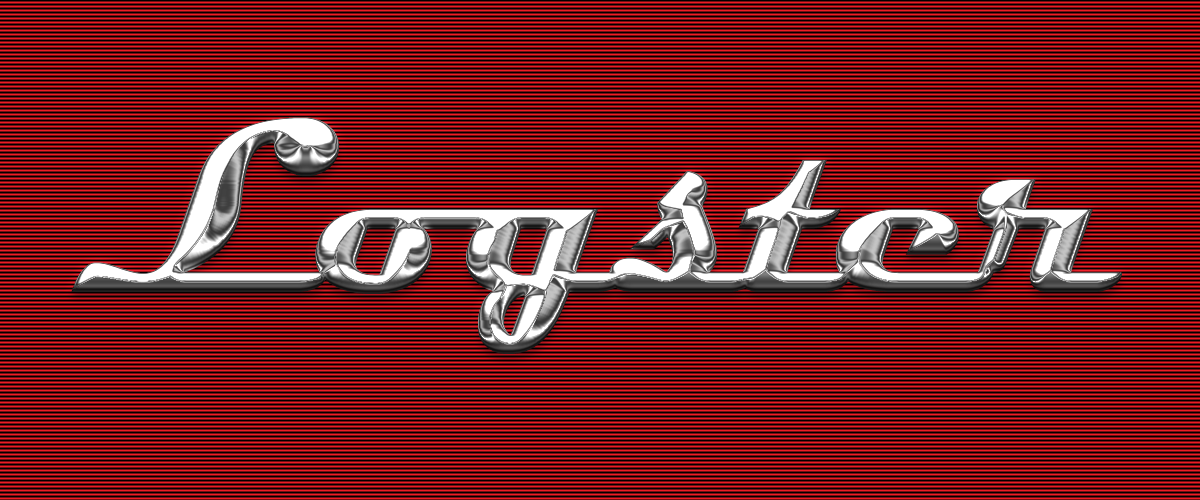
<style>
.page{position:relative;width:1200px;height:500px;background:#760e12}
.page>*{position:absolute;margin:0}
.t1{font:250px "Magneto-Bold"}
</style>
<div class="page">
<p class="t1" style="left:71px;top:117px;width:1051px;height:237px">Logster</p>
</div>
